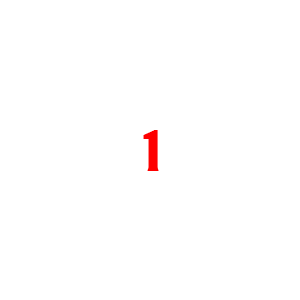
<style>
.page{position:relative;width:300px;height:300px;background:#ffffff}
.page>*{position:absolute;margin:0}
.t1{font:61.6px "Dungeon-Regular";color:#fe0000}
</style>
<div class="page">
<p class="t1" style="left:143px;top:130px;width:16px;height:41px">1</p>
</div>
